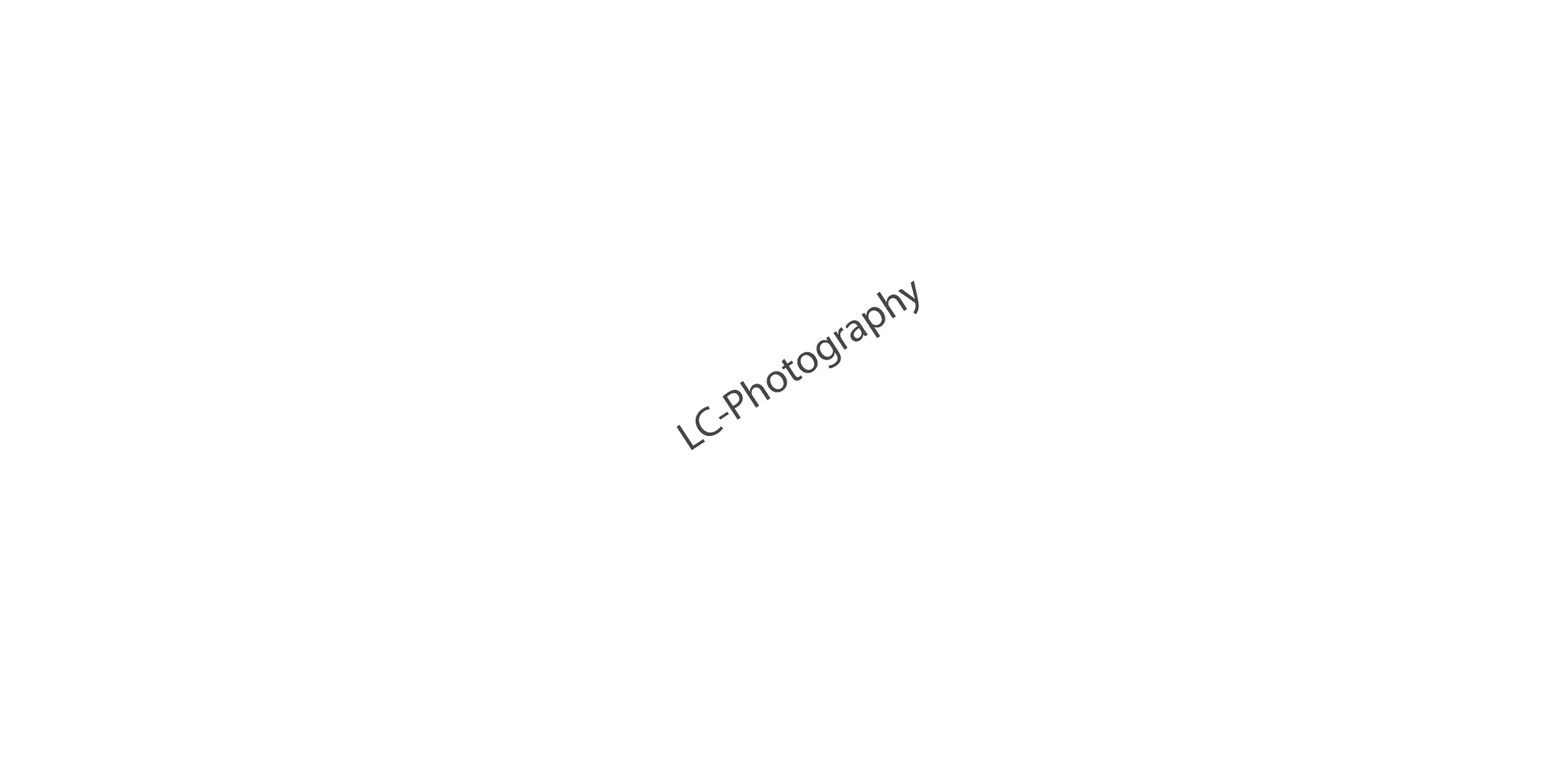
<style>
.page{position:relative;width:1544px;height:772px;background:#ffffff}
.page>*{position:absolute;margin:0}
.t1{font:41.4px "MyriadPro-Regular";color:#454545}
</style>
<div class="page">
<p class="t1" style="left:676px;top:281px;width:243px;height:169px;rotate:-33deg">LC-Photography</p>
</div>
